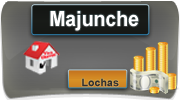
<style>
.page{position:relative;width:180px;height:100px}
.page>*{position:absolute;margin:0}
.t1{font:20.8px "Arial-BoldMT";color:#ffffff;scale:0.94 1}
.t2{font:10.4px "Arial-BoldMT";color:#303030;scale:1.03 1}
.t3{font:20.8px "Arial-BoldMT";color:#303030;scale:1.03 1}
</style>
<div class="page">
<p class="t1" style="left:50px;top:11px;width:89px;height:20px">Majunche</p>
<p class="t2" style="left:82px;top:78px;width:37px;height:9px"><span class="t3"><br></span>Lochas</p>
</div>
